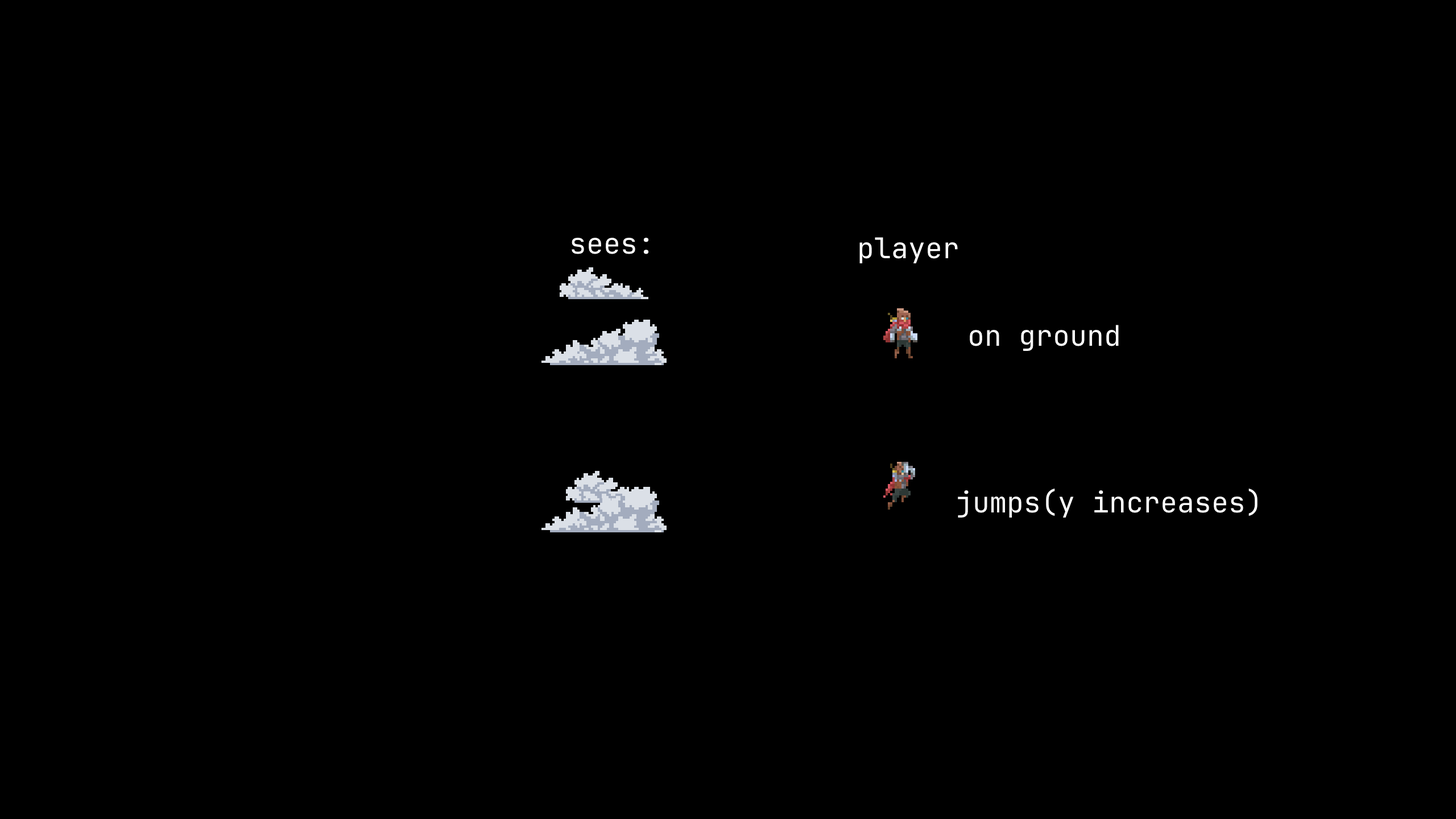
<style>
.page{position:relative;width:1456px;height:819px;background:#000000}
.page>*{position:absolute;margin:0}
.t1{font:28.4px "JetBrainsMono-Regular";color:#ffffff}
</style>
<div class="page">
<p class="t1" style="left:572px;top:238px;width:77px;height:16px">sees:</p>
<p class="t1" style="left:859px;top:237px;width:99px;height:26px">player</p>
<p class="t1" style="left:970px;top:325px;width:149px;height:26px">on ground</p>
<p class="t1" style="left:958px;top:489px;width:299px;height:29px">jumps(y increases)</p>
</div>
